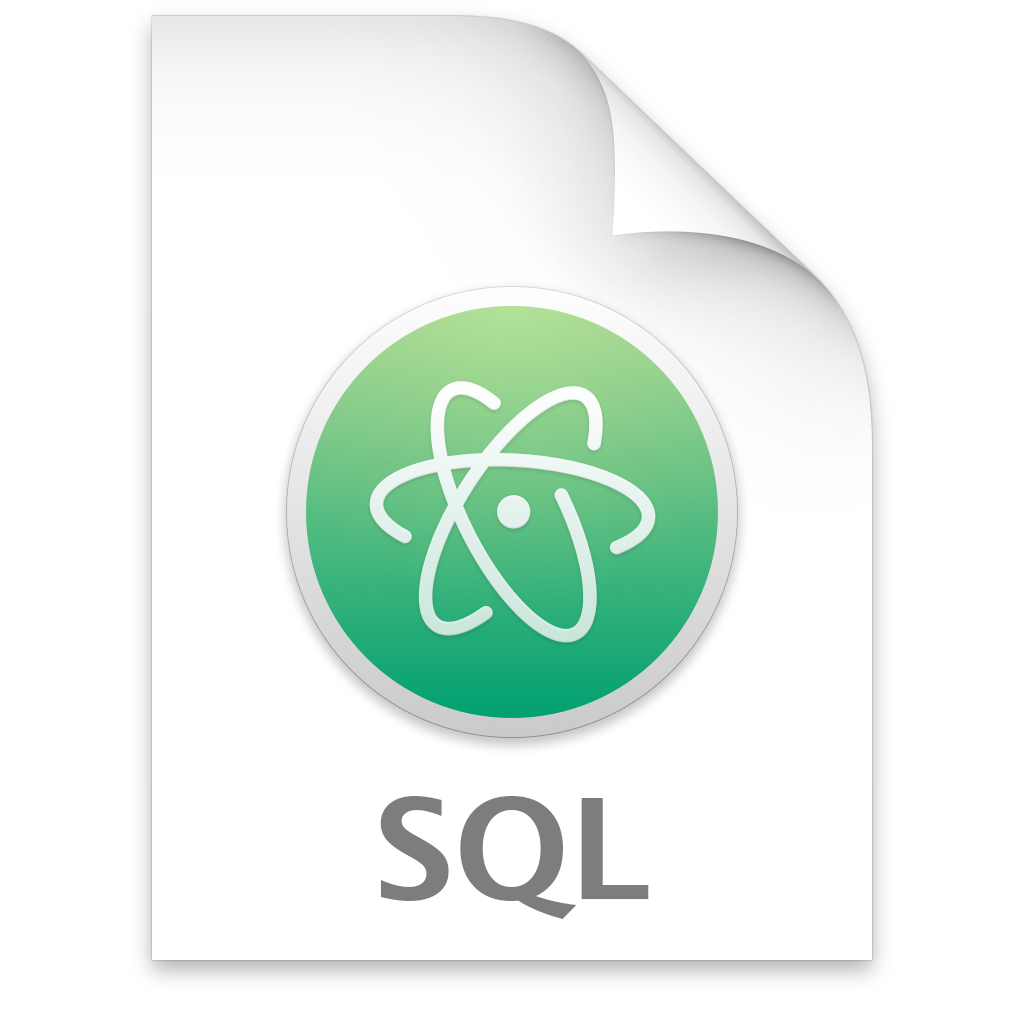
<style>
.page{position:relative;width:1024px;height:1024px;background:#ffffff}
.page>*{position:absolute;margin:0}
.t1{font:140px "LucidaGrande-Bold";color:#7d7d7d}
</style>
<div class="page">
<p class="t1" style="left:380px;top:796px;width:269px;height:123px">SQL</p>
</div>
